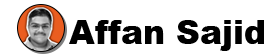
<style>
.page{position:relative;width:277px;height:54px;background:#ffffff}
.page>*{position:absolute;margin:0}
.t1{font:33px "Arial-Black";color:#000000}
</style>
<div class="page">
<p class="t1" style="left:69px;top:20px;width:195px;height:31px">Affan Sajid</p>
</div>
